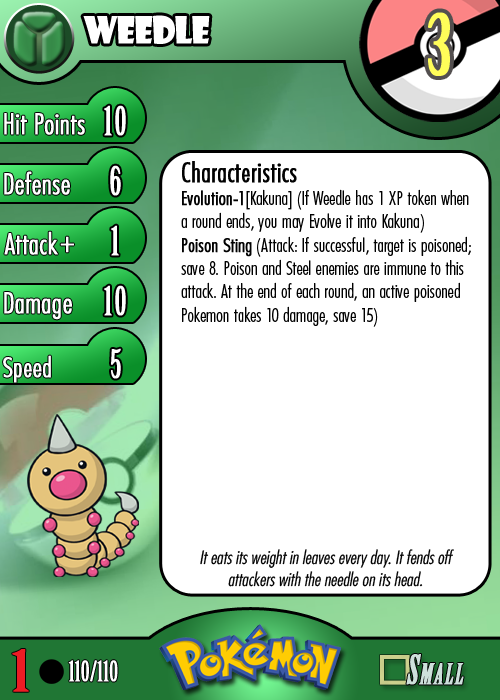
<style>
.page{position:relative;width:500px;height:700px;background:#ffffff}
.page>*{position:absolute;margin:0}
.t1{font:36.7px "ShowcardGothic-Reg";letter-spacing:-0.025em;color:#ffffff;scale:0.91 1}
.t2{font:83.3px "BirchStd";letter-spacing:0.025em;color:#fffd59;font-weight:bold}
.t3{font:27.8px "Futura-CondensedLight";color:#ffffff;font-weight:bold}
.t4{font:38.9px "BirchStd";letter-spacing:0.035em;color:#ffffff;font-weight:bold}
.t5{font:19.4px "FuturaCondensedBQ-Light";color:#010101}
.t6{font:27.8px "FuturaCondensedBQ-Light";color:#010101;font-weight:bold}
.t7{font:19.4px "FuturaCondensedBQ-Light";color:#010101;font-weight:bold}
.t8{font:30.6px "Futura-CondensedLight";color:#ffffff;font-weight:bold}
.t9{font:27.8px "FuturaCondensedBQ-Light";color:#ffffff;font-weight:bold}
.t10{font:18.1px "Futura-CondensedLight";color:#010101;font-style:italic}
.t11{font:55.6px "BirchStd";color:#ed1c24;font-weight:bold;scale:1.5 1}
.t12{font:27.8px "BirchStd";color:#ffffff;font-weight:bold}
</style>
<div class="page">
<p class="t1" style="left:83px;top:15px;width:127px;height:29px">weedle</p>
<p class="t2" style="left:428px;top:12px;width:22px;height:64px">3</p>
<p class="t3" style="left:4px;top:113px;width:81px;height:22px">Hit Points</p>
<p class="t4" style="left:104px;top:105px;width:22px;height:31px">10</p>
<p class="t5" style="left:181px;top:161px;width:290px;height:166px"><span class="t6">Characteristics<br></span><span class="t7">Evolution-1</span>[Kakuna] (If Weedle has 1 XP token when a round ends, you may Evolve it into Kakuna)<br><span class="t7">Poison Sting</span> (Attack: If successful, target is poisoned; save 8. Poison and Steel enemies are immune to this attack. At the end of each round, an active poisoned Pokemon takes 10 damage, save 15)</p>
<p class="t3" style="left:4px;top:171px;width:66px;height:24px">Defense</p>
<p class="t4" style="left:110px;top:165px;width:11px;height:31px">6</p>
<p class="t3" style="left:4px;top:231px;width:54px;height:24px">Attack</p>
<p class="t4" style="left:111px;top:225px;width:8px;height:31px">1</p>
<p class="t8" style="left:60px;top:236px;width:14px;height:17px">+</p>
<p class="t3" style="left:4px;top:292px;width:68px;height:28px">Damage</p>
<p class="t4" style="left:104px;top:285px;width:22px;height:31px">10</p>
<p class="t4" style="left:111px;top:348px;width:10px;height:31px">5</p>
<p class="t9" style="left:3px;top:355px;width:48px;height:28px">Speed</p>
<p class="t10" style="left:200px;top:549px;width:254px;height:38px;text-align:center">It eats its weight in leaves every day. It fends off attackers with the needle on its head.</p>
<p class="t11" style="left:12px;top:649px;width:17px;height:43px">1</p>
<p class="t12" style="left:68px;top:660px;width:50px;height:22px">110/110</p>
</div>
